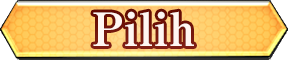
<style>
.page{position:relative;width:288px;height:60px}
.page>*{position:absolute;margin:0}
.t1{font:46px "RyuminPro-ExBold";color:#fff6f2}
</style>
<div class="page">
<p class="t1" style="left:93px;top:11px;width:101px;height:35px">Pilih</p>
</div>
